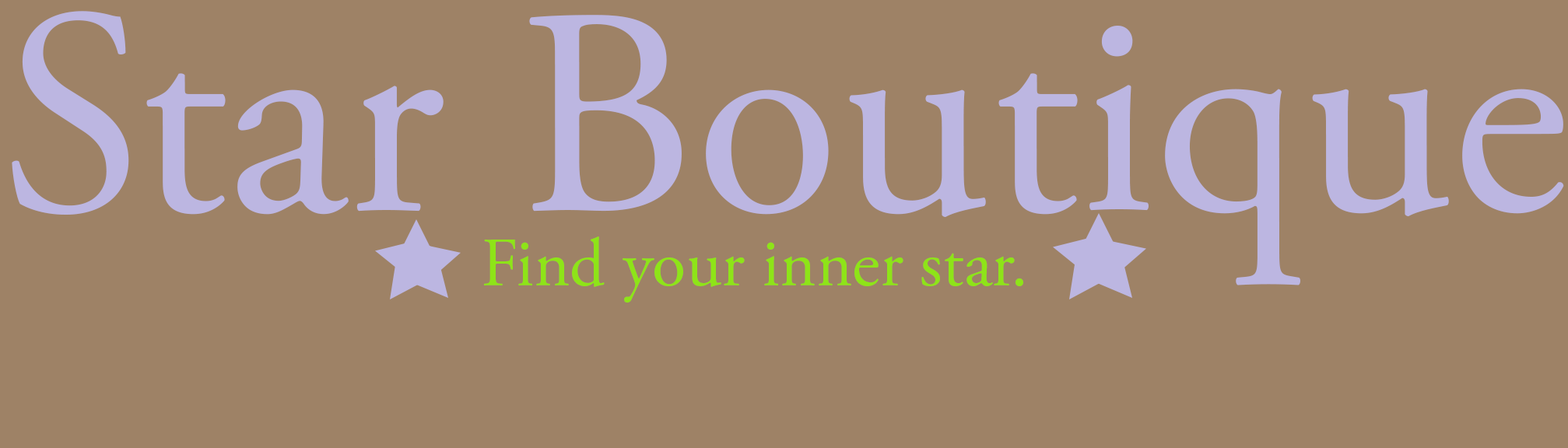
<style>
.page{position:relative;width:1568px;height:448px;background:#9e8266}
.page>*{position:absolute;margin:0}
.t1{font:294.2px "AGaramondPro-Regular";color:#bcb6e1}
.t2{font:69.3px "AGaramondPro-Regular";color:#8ee418}
</style>
<div class="page">
<p class="t1" style="left:12px;top:11px;width:1552px;height:275px">Star Boutique</p>
<p class="t2" style="left:484px;top:237px;width:539px;height:66px">Find your inner star.</p>
</div>
